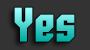
<style>
.page{position:relative;width:90px;height:50px;background:#333333}
.page>*{position:absolute;margin:0}
.t1{font:47.9px "Whitestone-Bold"}
</style>
<div class="page">
<p class="t1" style="left:14px;top:7px;width:61px;height:35px">Yes</p>
</div>
